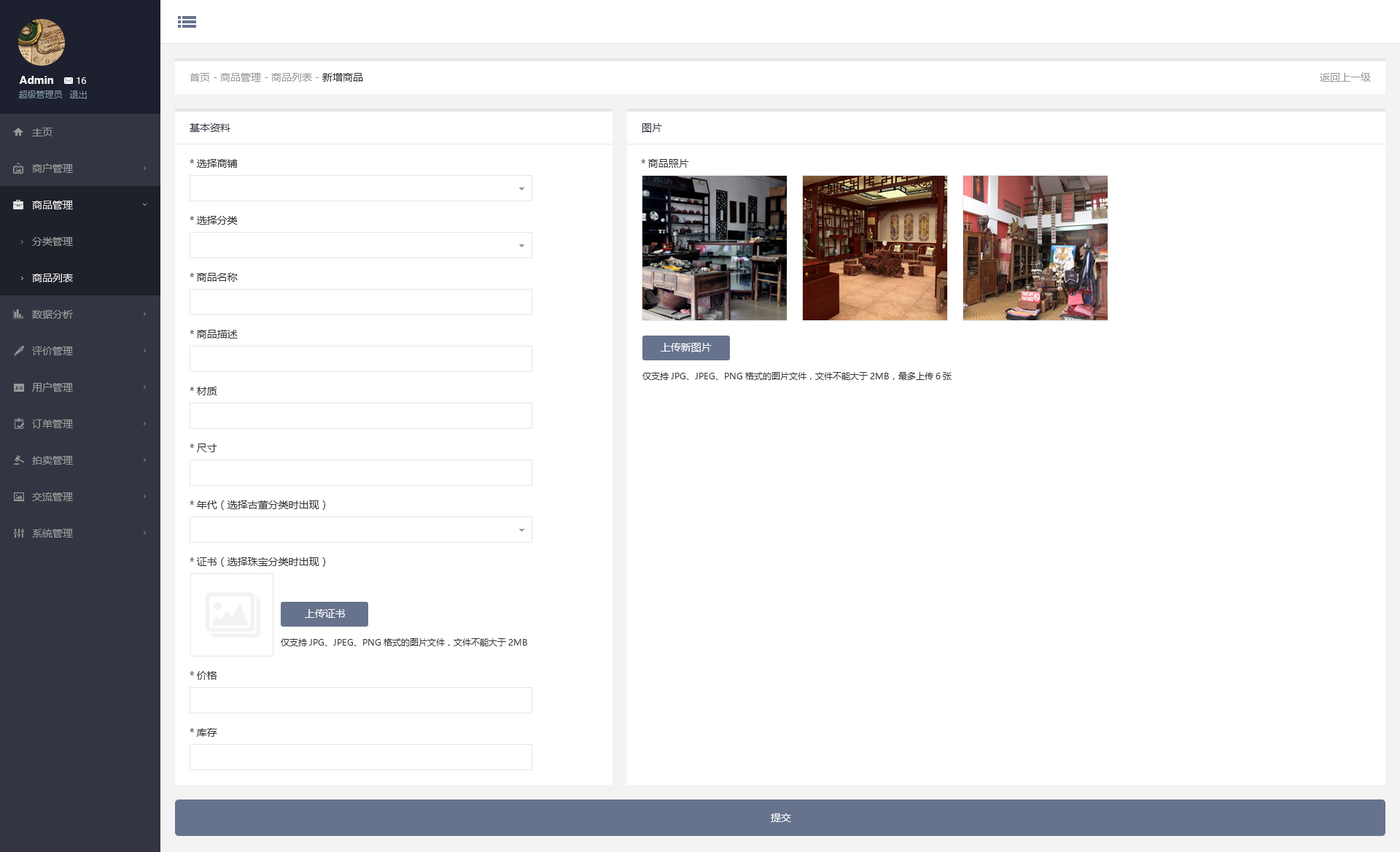
<style>
.page{position:relative;width:1400px;height:852px;background:#ffffff}
.page>*{position:absolute;margin:0}
.t1{font:10.2px "MicrosoftYaHei-Bold";color:#ffffff}
.t2{font:8.8px "MicrosoftYaHei";color:#ffffff}
.t3{font:10.2px "MicrosoftYaHei";color:#999999}
.t4{font:10.2px "MicrosoftYaHei";color:#333333}
.t5{font:8.8px "MicrosoftYaHei";color:#8095a8}
.t6{font:10.2px "MicrosoftYaHei";color:#333642}
.t7{font:10.2px/36.5px "MicrosoftYaHei";color:#999999}
.t8{font:10.2px/36.5px "MicrosoftYaHei";color:#e6e6e6}
.t9{font:10.2px/56.9px "MicrosoftYaHei";color:#333333}
.t10{font:10.2px "MicrosoftYaHei";color:#ffffff}
.t11{font:8.8px "MicrosoftYaHei";color:#333333}
</style>
<div class="page">
<p class="t1" style="left:19px;top:76px;width:34px;height:8px">Admin</p>
<p class="t2" style="left:77px;top:77px;width:9px;height:7px">16</p>
<p class="t3" style="left:190px;top:73px;width:173px;height:9px">首页 - 商品管理 - 商品列表 - <span class="t4">新增商品</span></p>
<p class="t3" style="left:1320px;top:72px;width:51px;height:10px">返回上一级</p>
<p class="t5" style="left:19px;top:90px;width:44px;height:8px">超级管理员</p>
<p class="t5" style="left:69px;top:90px;width:18px;height:9px">退出</p>
<p class="t6" style="left:190px;top:123px;width:40px;height:9px">基本资料</p>
<p class="t6" style="left:642px;top:123px;width:20px;height:10px">图片</p>
<p class="t7" style="left:32px;top:128px;width:41px;height:409px">主页<br>商户管理<br><span class="t8">商品管理<br></span><br><br>数据分析<br>评价管理<br>用户管理<br>订单管理<br>拍卖管理<br>交流管理<br>系统管理</p>
<p class="t9" style="left:190px;top:159px;width:135px;height:577px">*选择商铺<br>*选择分类<br>*商品名称<br>*商品描述<br>*材质<br>*尺寸<br>*年代（选择古董分类时出现）<br>*证书（选择珠宝分类时出现）<br><br>*价格<br>*库存</p>
<p class="t4" style="left:641px;top:159px;width:48px;height:9px">*商品照片</p>
<p class="t7" style="left:32px;top:237px;width:41px;height:45px">分类管理<br><span class="t8">商品列表</span></p>
<p class="t10" style="left:661px;top:343px;width:51px;height:9px">上传新图片</p>
<p class="t11" style="left:642px;top:372px;width:310px;height:8px">仅支持JPG、JPEG、PNG格式的图片文件，文件不能大于2MB，最多上传6张</p>
<p class="t10" style="left:305px;top:609px;width:40px;height:9px">上传证书</p>
<p class="t11" style="left:281px;top:638px;width:246px;height:8px">仅支持JPG、JPEG、PNG格式的图片文件，文件不能大于2MB</p>
<p class="t10" style="left:771px;top:813px;width:20px;height:9px">提交</p>
</div>
